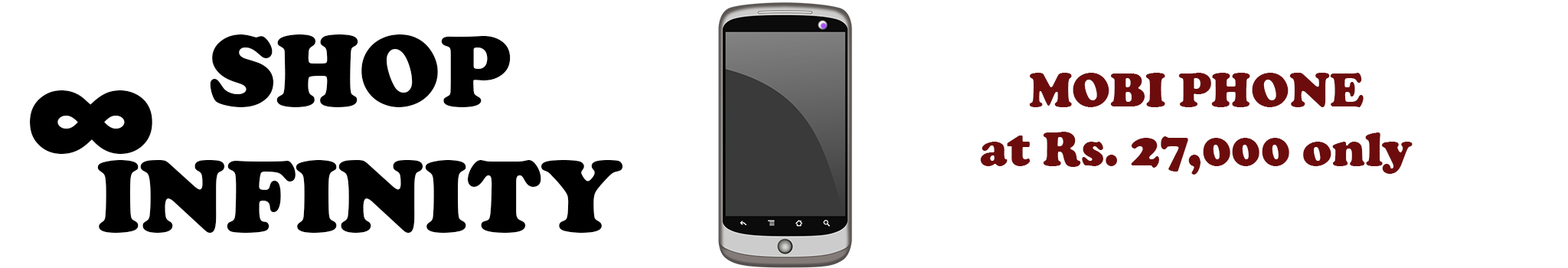
<style>
.page{position:relative;width:1568px;height:268px;background:#ffffff}
.page>*{position:absolute;margin:0}
.t1{font:104.1px "CooperBlack";color:#000000}
.t2{font:49px "CooperBlack";color:#6d0c0c}
.t3{font:193.2px "CooperBlack";color:#000000}
</style>
<div class="page">
<p class="t1" style="left:97px;top:34px;width:526px;height:199px;text-align:center">SHOP<br>INFINITY</p>
<p class="t2" style="left:980px;top:73px;width:433px;height:102px;text-align:center">MOBI PHONE<br>at Rs. 27,000 only</p>
<p class="t3" style="left:30px;top:90px;width:122px;height:64px">∞</p>
</div>
